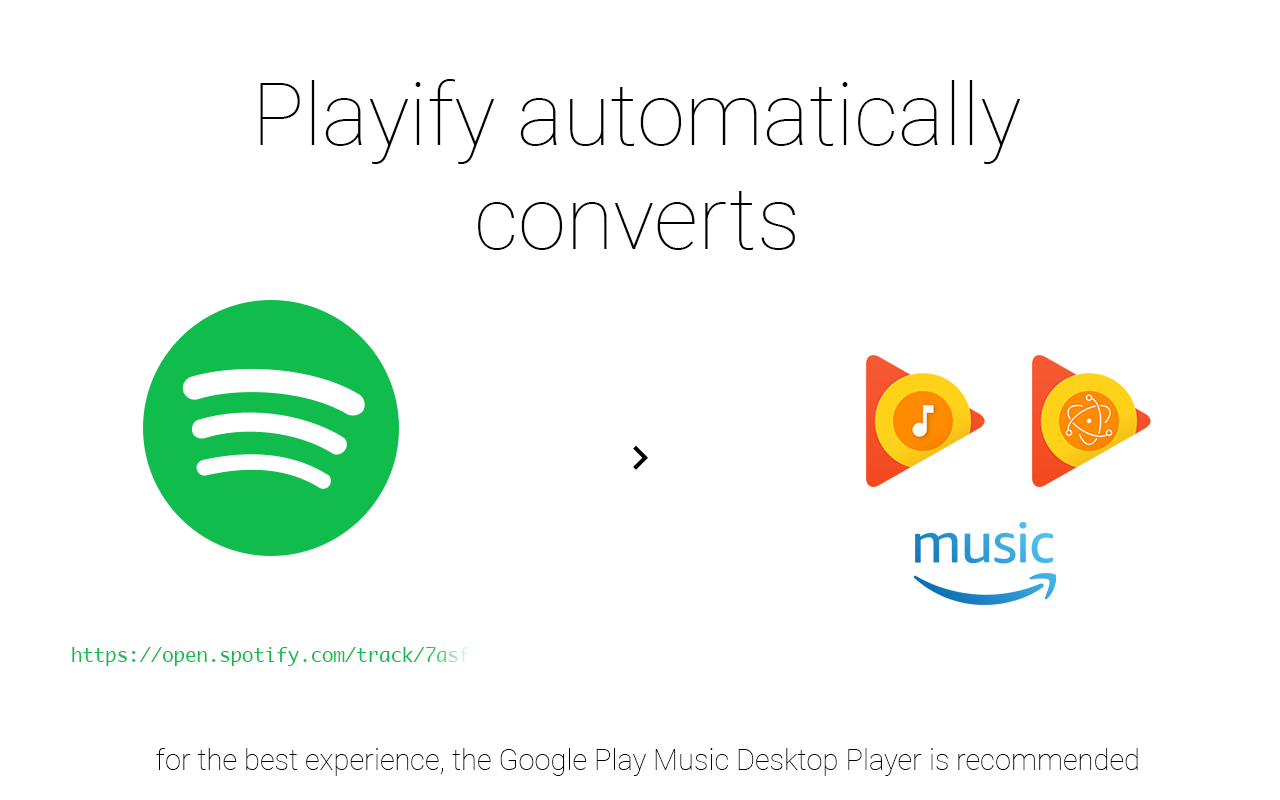
<style>
.page{position:relative;width:1280px;height:800px;background:#ffffff}
.page>*{position:absolute;margin:0}
.t1{font:87px "Roboto-Thin";color:#000000}
.t2{font:19px "Monaco";color:#10bc4c}
.t3{font:29px "Roboto-Thin";color:#000000}
</style>
<div class="page">
<p class="t1" style="left:260px;top:79px;width:761px;height:171px;text-align:center">Playify automatically<br>converts</p>
<p class="t2" style="left:72px;top:647px;width:398px;height:19px">https://open.spotify.com/track/7asf</p>
<p class="t3" style="left:156px;top:748px;width:982px;height:28px">for the best experience, the Google Play Music Desktop Player is recommended</p>
</div>
